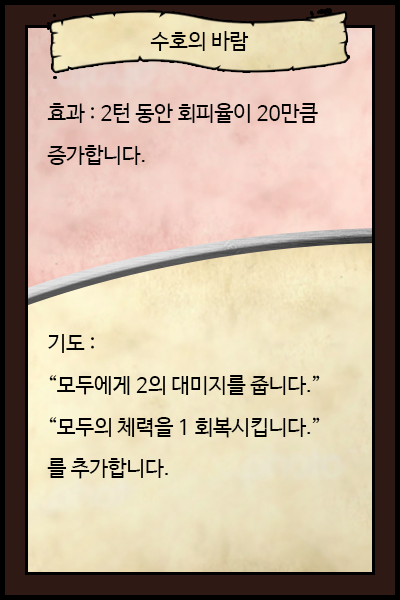
<style>
.page{position:relative;width:400px;height:600px}
.page>*{position:absolute;margin:0}
.t1{font:20.8px "NanumBarunGothic";color:#000000}
.t2{font:20.8px/41.7px "NanumBarunGothic";color:#000000}
</style>
<div class="page">
<p class="t1" style="left:150px;top:31px;width:99px;height:20px">수호의 바람</p>
<p class="t2" style="left:47px;top:103px;width:271px;height:62px">효과 : 2턴 동안 회피율이 20만큼<br>증가합니다.</p>
<p class="t2" style="left:47px;top:334px;width:273px;height:145px">기도 : <br>“모두에게 2의 대미지를 줍니다.”<br>“모두의 체력을 1 회복시킵니다.”<br>를 추가합니다.</p>
</div>
